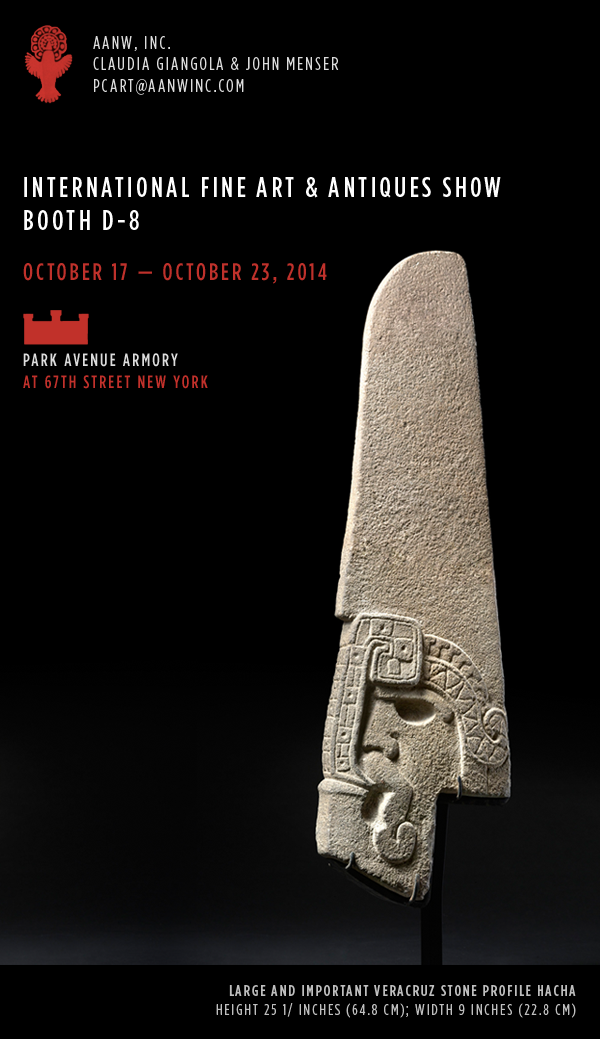
<style>
.page{position:relative;width:600px;height:1039px;background:#000000}
.page>*{position:absolute;margin:0}
.t1{font:18px "GothamHTF-BookCondensed";letter-spacing:0.12em;color:#dddddd;text-transform:uppercase}
.t2{font:24px "GothamHTF-BookCondensed";letter-spacing:0.12em;color:#fefefe;text-transform:uppercase}
.t3{font:28px "GothamHTF-MediumCondensed";letter-spacing:0.12em;color:#fefefe;text-transform:uppercase}
.t4{font:24px "GothamHTF-MediumCondensed";letter-spacing:0.12em;color:#bf312b;text-transform:uppercase}
.t5{font:18px "GothamHTF-MediumCondensed";letter-spacing:0.12em;color:#dddddd;text-transform:uppercase}
.t6{font:18px "GothamHTF-MediumCondensed";letter-spacing:0.12em;color:#c2312b;text-transform:uppercase}
.t7{font:15.8px "GothamHTF-BookCondensed";letter-spacing:0.12em;color:#bebebe;text-transform:uppercase}
.t8{font:15.8px "GothamHTF-MediumCondensed";letter-spacing:0.12em;color:#bebebe;text-transform:uppercase}
</style>
<div class="page">
<p class="t1" style="left:93px;top:36px;width:246px;height:59px">AANW, INC.<br>Claudia Giangola &amp; John Menser<br>pcart@aanwinc.com</p>
<p class="t2" style="left:24px;top:177px;width:477px;height:53px"><span class="t3">International Fine Art &amp; Antiques Show<br>Booth D-8<br></span>October 17 – October 23, 2014<br>Park Avenue Armory at 67th Street<br>New York</p>
<p class="t4" style="left:23px;top:263px;width:304px;height:126px">October 17 — October 23, 2014<br><br><br><br><span class="t5">Park Avenue Armory <br></span><span class="t6">at 67th Street New York</span></p>
<p class="t7" style="left:216px;top:985px;width:360px;height:33px;text-align:right"><span class="t8">LARGE AND IMPORTANT VERACRUZ STONE PROFILE HACHA<br></span>Height 25 1/ inches (64.8 cm); Width 9 inches (22.8 cm)</p>
</div>
